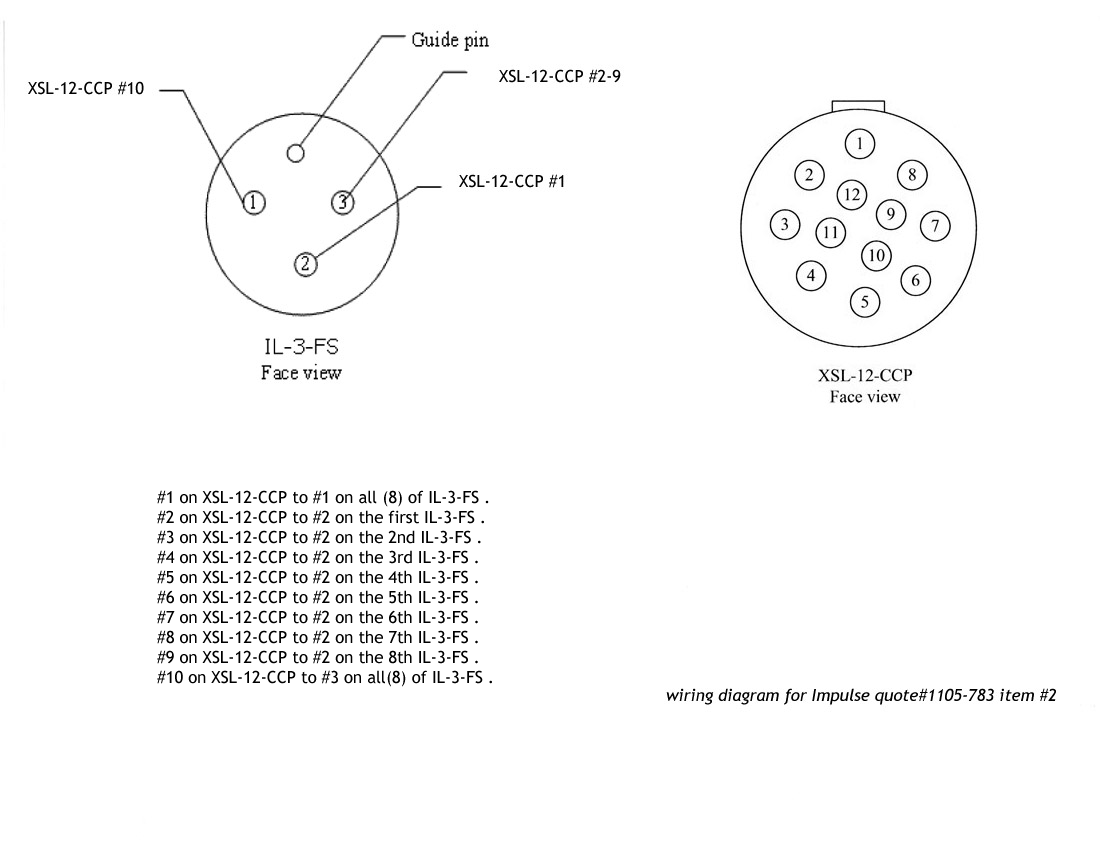
<style>
.page{position:relative;width:1100px;height:848px;background:#ffffff}
.page>*{position:absolute;margin:0}
.t1{font:16.7px "TrebuchetMS";color:#000000}
</style>
<div class="page">
<p class="t1" style="left:157px;top:490px;width:335px;height:197px">#1 on XSL-12-CCP to #1 on all (8) of IL-3-FS .<br>#2 on XSL-12-CCP to #2 on the first IL-3-FS .<br>#3 on XSL-12-CCP to #2 on the 2nd IL-3-FS .<br>#4 on XSL-12-CCP to #2 on the 3rd IL-3-FS .<br>#5 on XSL-12-CCP to #2 on the 4th IL-3-FS .<br>#6 on XSL-12-CCP to #2 on the 5th IL-3-FS .<br>#7 on XSL-12-CCP to #2 on the 6th IL-3-FS .<br>#8 on XSL-12-CCP to #2 on the 7th IL-3-FS .<br>#9 on XSL-12-CCP to #2 on the 8th IL-3-FS .<br>#10 on XSL-12-CCP to #3 on all(8) of IL-3-FS .</p>
</div>
